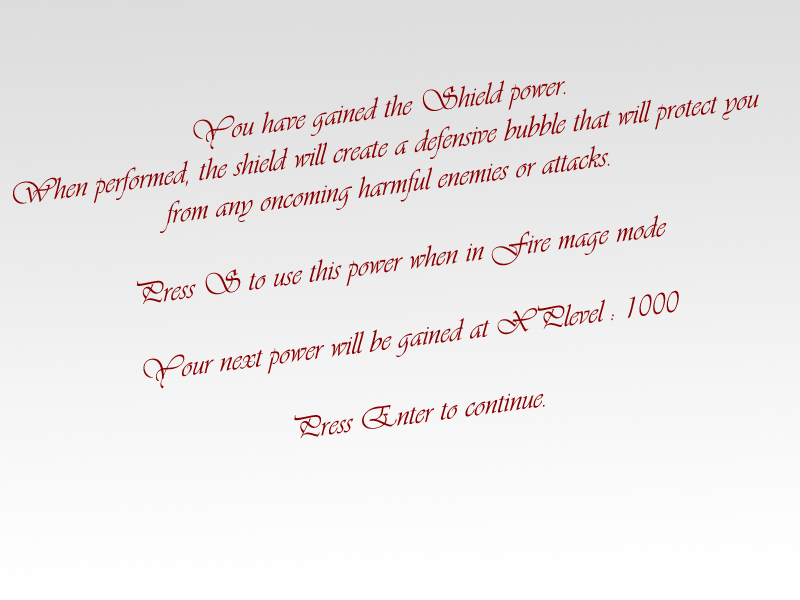
<style>
.page{position:relative;width:800px;height:600px}
.page>*{position:absolute;margin:0}
.t1{font:32px "Vivaldii";color:#8a0000}
</style>
<div class="page">
<p class="t1" style="left:13px;top:80px;width:746px;height:359px;text-align:center;rotate:-7deg">You have gained the Shield power.<br>When performed, the shield will create a defensive bubble that will protect you from any oncoming harmful enemies or attacks.<br><br>Press S to use this power when in Fire mage mode<br><br>Your next power will be gained at XPlevel : 1000<br><br>Press Enter to continue.</p>
</div>
